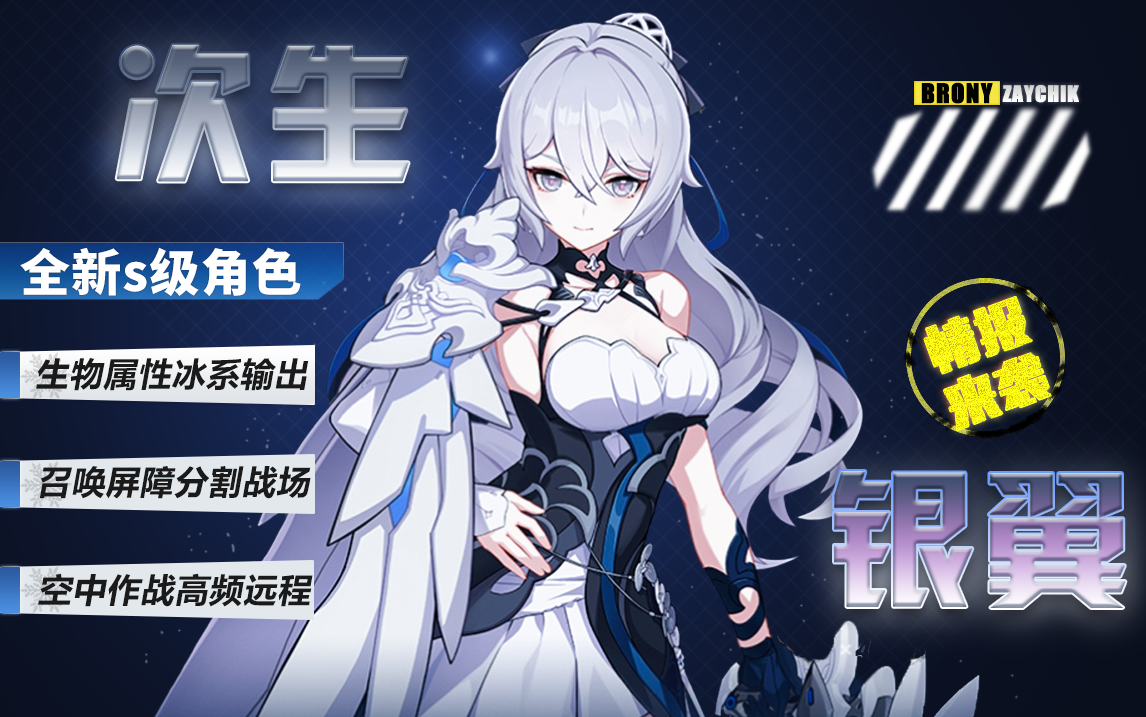
<style>
.page{position:relative;width:1146px;height:717px}
.page>*{position:absolute;margin:0}
.t1{font:25px "Impact";letter-spacing:0.025em;color:#000000;text-transform:uppercase;font-weight:bold}
.t2{font:20.8px "Impact";letter-spacing:0.025em;color:#eaeaea;text-transform:uppercase;font-weight:bold}
.t3{font:50px "SourceHanSansCN-Heavy";letter-spacing:0.025em;color:#ffffff}
.t4{font:33.3px "MicrosoftYaHeiUI-Bold";letter-spacing:0.025em;color:#1a1a1a;text-transform:uppercase;font-style:italic}
</style>
<div class="page">
<p class="t1" style="left:921px;top:82px;width:72px;height:22px">BRONY</p>
<p class="t2" style="left:1002px;top:85px;width:77px;height:18px">ZAYCHIK</p>
<p class="t3" style="left:20px;top:247px;width:281px;height:50px">全新s级角色</p>
<p class="t4" style="left:36px;top:358px;width:273px;height:33px">生物属性冰系输出</p>
<p class="t4" style="left:39px;top:466px;width:272px;height:33px">召唤屏障分割战场</p>
<p class="t4" style="left:38px;top:573px;width:275px;height:34px">空中作战高频远程</p>
</div>
